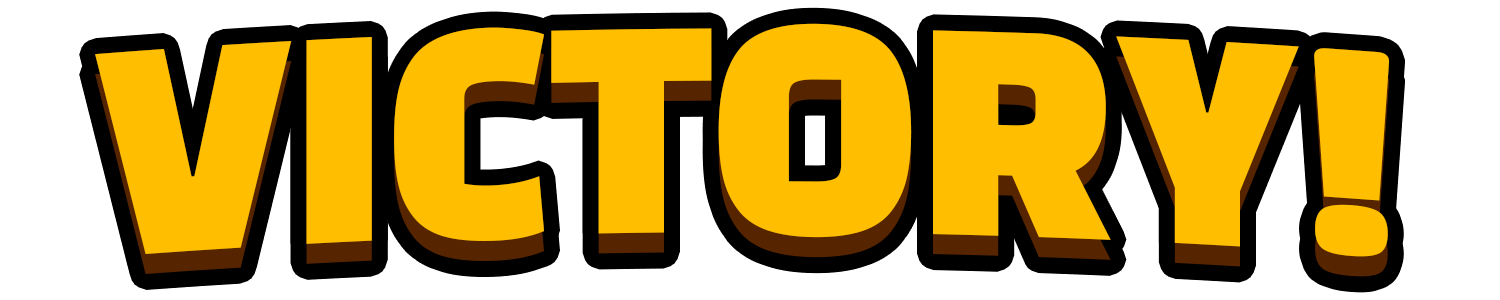
<style>
.page{position:relative;width:1500px;height:300px;background:#ffbe00}
.page>*{position:absolute;margin:0}
.t1{font:324.4px "ChangaOne";color:#ffbe00}
</style>
<div class="page">
<p class="t1" style="left:95px;top:23px;width:1295px;height:234px">VICTORY!</p>
</div>
